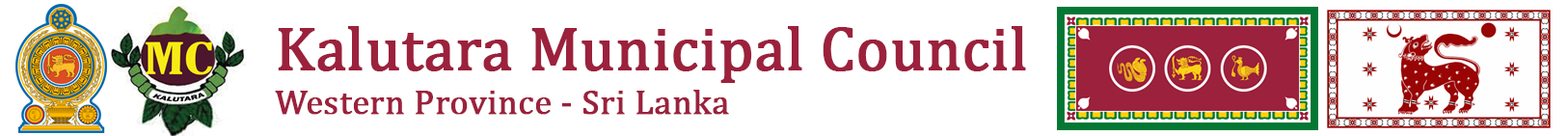
<style>
.page{position:relative;width:1568px;height:136px;background:#ffffff}
.page>*{position:absolute;margin:0}
.t1{font:61.6px "CambriaMath";color:#9c213c;font-weight:bold}
.t2{font:34.8px "CambriaMath";color:#9c213c;font-weight:bold}
</style>
<div class="page">
<p class="t1" style="left:278px;top:26px;width:748px;height:57px">Kalutara Municipal Council</p>
<p class="t2" style="left:275px;top:90px;width:454px;height:25px">Western Province - Sri Lanka</p>
</div>
